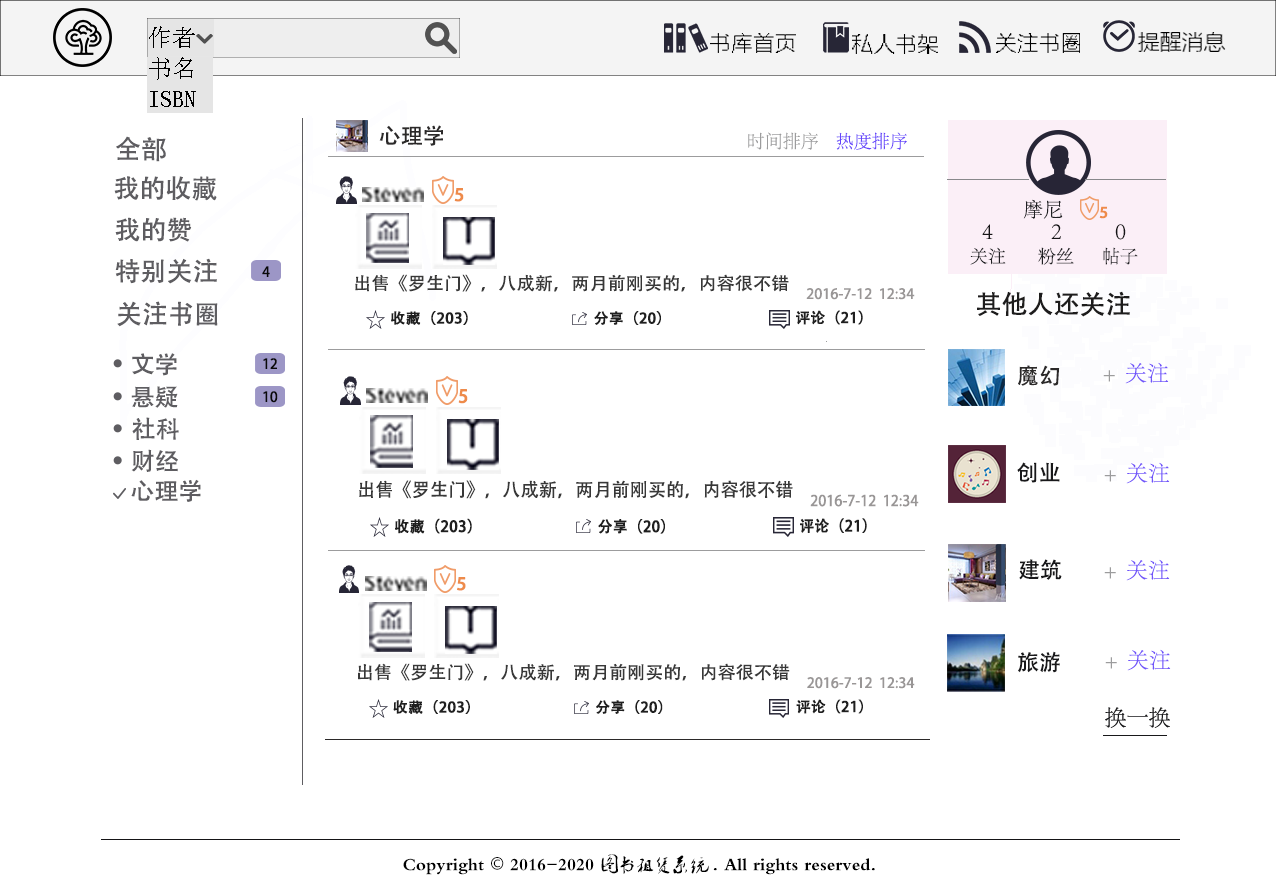
<style>
.page{position:relative;width:1276px;height:893px;background:#ffffff}
.page>*{position:absolute;margin:0}
.t1{font:24px "SimSun";color:#000000}
.t2{font:21.9px "MicrosoftYaHeiLight";color:#040404}
.t3{font:21.9px "MicrosoftYaHeiLight";color:#000000}
.t4{font:22px "AdobeHeitiStd-Regular";color:#2b2929}
.t5{font:26px "AdobeHeitiStd-Regular";color:#5e5d61}
.t6{font:18px "AdobeSongStd-Light";color:#9c9c9d}
.t7{font:18px "AdobeSongStd-Light";color:#6442fa}
.t8{font:16.7px "AdobeHeitiStd-Regular";letter-spacing:0.01em;color:#ee8b4a;font-weight:bold;scale:1.05 1}
.t9{font:20px "AdobeSongStd-Light";color:#202023}
.t10{font:14.3px "AdobeHeitiStd-Regular";letter-spacing:0.01em;color:#ee8b4a;font-weight:bold;scale:1.05 1}
.t11{font:24px "AdobeSongStd-Light";color:#151416}
.t12{font:18px "AdobeSongStd-Light";color:#202023}
.t13{font:14px "AdobeHeitiStd-Regular";color:#090909}
.t14{font:17.6px "AdobeHeitiStd-Regular";color:#383838;scale:1.03 1}
.t15{font:14.1px "AdobeHeitiStd-Regular";color:#999696}
.t16{font:26px "AdobeHeitiStd-Regular";color:#1d1c1c}
.t17{font:14.3px "AdobeHeitiStd-Regular";letter-spacing:0.01em;color:#1f1f1f;font-weight:bold;scale:1.03 1}
.t18{font:14.3px "AdobeHeitiStd-Regular";letter-spacing:0.01em;color:#1f1f1f;font-weight:bold}
.t19{font:24px "AdobeHeitiStd-Regular";color:#5e5d61}
.t20{font:22px "AdobeSongStd-Light";color:#7053fa}
.t21{font:22px "AdobeSongStd-Light";color:#9c9c9d}
.t22{font:17.6px "AdobeHeitiStd-Regular";letter-spacing:0.01em;color:#ee8b4a;font-weight:bold}
.t23{font:22px "AdobeHeitiStd-Regular";color:#18181a}
.t24{font:18.6px "AdobeHeitiStd-Regular";color:#383838}
.t25{font:14.9px "AdobeHeitiStd-Regular";color:#999696;scale:0.96 1}
.t26{font:15.1px "AdobeHeitiStd-Regular";letter-spacing:0.01em;color:#1f1f1f;font-weight:bold}
.t27{font:15.1px "AdobeHeitiStd-Regular";letter-spacing:0.01em;color:#1f1f1f;font-weight:bold;scale:0.96 1}
.t28{font:17.6px "AdobeHeitiStd-Regular";color:#383838}
.t29{font:18px "Ò¶¸ùÓÑÃ«±ÊÐÐÊé¼òÌå";color:#000000}
.t30{font:18px "AdobeHeitiStd-Regular";color:#000000}
</style>
<div class="page">
<p class="t1" style="left:149px;top:26px;width:46px;height:22px">作者</p>
<p class="t2" style="left:710px;top:33px;width:86px;height:20px">书库首页</p>
<p class="t3" style="left:852px;top:34px;width:86px;height:20px">私人书架</p>
<p class="t3" style="left:996px;top:33px;width:84px;height:20px">关注书圈</p>
<p class="t3" style="left:1137px;top:32px;width:89px;height:20px">提醒消息</p>
<p class="t4" style="left:379px;top:125px;width:64px;height:21px">心理学</p>
<p class="t5" style="left:116px;top:136px;width:50px;height:26px">全部</p>
<p class="t6" style="left:748px;top:132px;width:70px;height:18px">时间排序</p>
<p class="t7" style="left:836px;top:132px;width:71px;height:18px">热度排序</p>
<p class="t5" style="left:114px;top:176px;width:103px;height:25px">我的收藏</p>
<p class="t8" style="left:454px;top:188px;width:10px;height:14px">5</p>
<p class="t9" style="left:1023px;top:199px;width:40px;height:20px">摩尼</p>
<p class="t10" style="left:1099px;top:206px;width:9px;height:13px">5</p>
<p class="t5" style="left:115px;top:217px;width:77px;height:25px">我的赞</p>
<p class="t11" style="left:982px;top:224px;width:11px;height:15px">4</p>
<p class="t11" style="left:1051px;top:224px;width:10px;height:15px">2</p>
<p class="t11" style="left:1115px;top:224px;width:11px;height:16px">0</p>
<p class="t12" style="left:970px;top:247px;width:36px;height:18px">关注</p>
<p class="t12" style="left:1038px;top:247px;width:36px;height:18px">粉丝</p>
<p class="t12" style="left:1103px;top:247px;width:35px;height:18px">帖子</p>
<p class="t5" style="left:115px;top:258px;width:102px;height:26px">特别关注</p>
<p class="t13" style="left:262px;top:266px;width:8px;height:11px">4</p>
<p class="t14" style="left:355px;top:274px;width:434px;height:18px">出售《罗生门》，八成新，两月前刚买的，内容很不错</p>
<p class="t15" style="left:806px;top:288px;width:109px;height:12px">2016-7-12  12:34</p>
<p class="t16" style="left:977px;top:291px;width:153px;height:26px">其他人还关注</p>
<p class="t5" style="left:117px;top:301px;width:101px;height:26px">关注书圈</p>
<p class="t17" style="left:391px;top:311px;width:77px;height:14px">收藏（203）</p>
<p class="t18" style="left:594px;top:311px;width:67px;height:14px">分享（20）</p>
<p class="t18" style="left:796px;top:310px;width:67px;height:15px">评论（21）</p>
<p class="t19" style="left:132px;top:353px;width:45px;height:23px">文学</p>
<p class="t13" style="left:263px;top:358px;width:14px;height:11px">12</p>
<p class="t4" style="left:1018px;top:365px;width:42px;height:21px">魔幻</p>
<p class="t20" style="left:1103px;top:362px;width:66px;height:22px"><span class="t21">+</span>  关注</p>
<p class="t19" style="left:131px;top:386px;width:47px;height:22px">悬疑</p>
<p class="t22" style="left:458px;top:389px;width:10px;height:15px">5</p>
<p class="t13" style="left:263px;top:391px;width:15px;height:12px">10</p>
<p class="t19" style="left:132px;top:417px;width:47px;height:23px">社科</p>
<p class="t19" style="left:131px;top:449px;width:47px;height:23px">财经</p>
<p class="t23" style="left:1017px;top:462px;width:43px;height:21px">创业</p>
<p class="t20" style="left:1104px;top:462px;width:66px;height:22px"><span class="t21">+</span>  关注</p>
<p class="t19" style="left:131px;top:479px;width:70px;height:23px">心理学</p>
<p class="t24" style="left:359px;top:480px;width:434px;height:19px">出售《罗生门》，八成新，两月前刚买的，内容很不错</p>
<p class="t25" style="left:810px;top:494px;width:109px;height:13px">2016-7-12  12:34</p>
<p class="t26" style="left:395px;top:518px;width:77px;height:16px">收藏（203）</p>
<p class="t27" style="left:598px;top:519px;width:67px;height:15px">分享（20）</p>
<p class="t27" style="left:800px;top:518px;width:67px;height:15px">评论（21）</p>
<p class="t23" style="left:1019px;top:559px;width:43px;height:21px">建筑</p>
<p class="t20" style="left:1104px;top:559px;width:66px;height:22px"><span class="t21">+</span>  关注</p>
<p class="t8" style="left:457px;top:577px;width:9px;height:14px">5</p>
<p class="t23" style="left:1018px;top:651px;width:42px;height:22px">旅游</p>
<p class="t20" style="left:1105px;top:649px;width:66px;height:22px"><span class="t21">+</span>  关注</p>
<p class="t28" style="left:358px;top:663px;width:432px;height:18px">出售《罗生门》，八成新，两月前刚买的，内容很不错</p>
<p class="t15" style="left:807px;top:677px;width:108px;height:12px">2016-7-12  12:34</p>
<p class="t18" style="left:393px;top:700px;width:77px;height:14px">收藏（203）</p>
<p class="t18" style="left:596px;top:700px;width:67px;height:14px">分享（20）</p>
<p class="t18" style="left:796px;top:699px;width:67px;height:15px">评论（21）</p>
<p class="t29" style="left:403px;top:854px;width:472px;height:21px">Copyright <span class="t30">©</span> 2016-2020 图书租赁系统. All rights reserved.</p>
</div>
